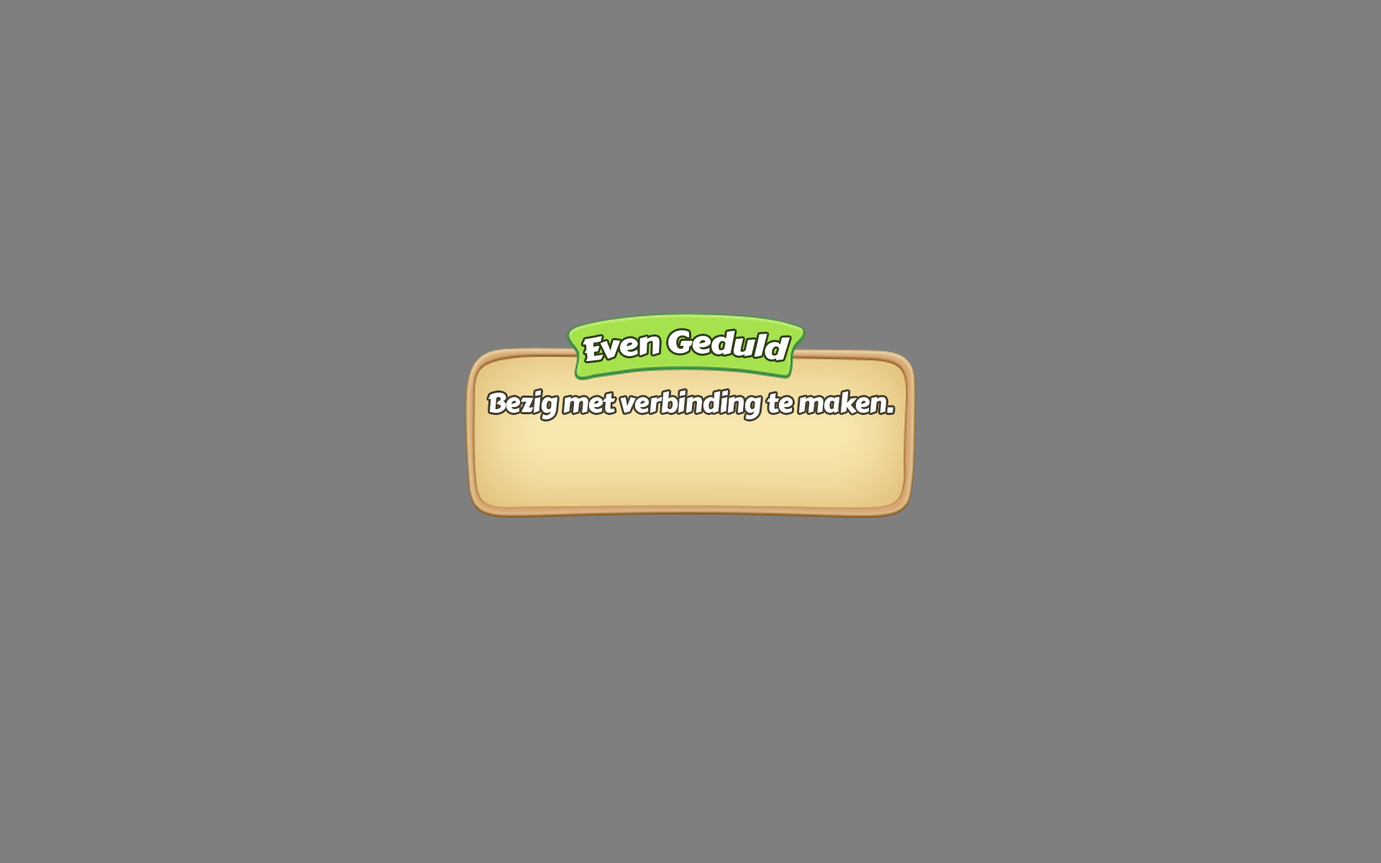
<style>
.page{position:relative;width:1381px;height:863px;background:#7f7f7f}
.page>*{position:absolute;margin:0}
.t1{font:30.9px "CarterOne";letter-spacing:-0.02em;color:#ffffff;scale:1.09 1}
.t2{font:27.3px "CarterOne";letter-spacing:-0.02em;color:#ffffff}
</style>
<div class="page">
<p class="t1" style="left:583px;top:330px;width:207px;height:32px">Even Geduld</p>
<p class="t2" style="left:488px;top:390px;width:406px;height:29px">Bezig met verbinding te maken.</p>
</div>
